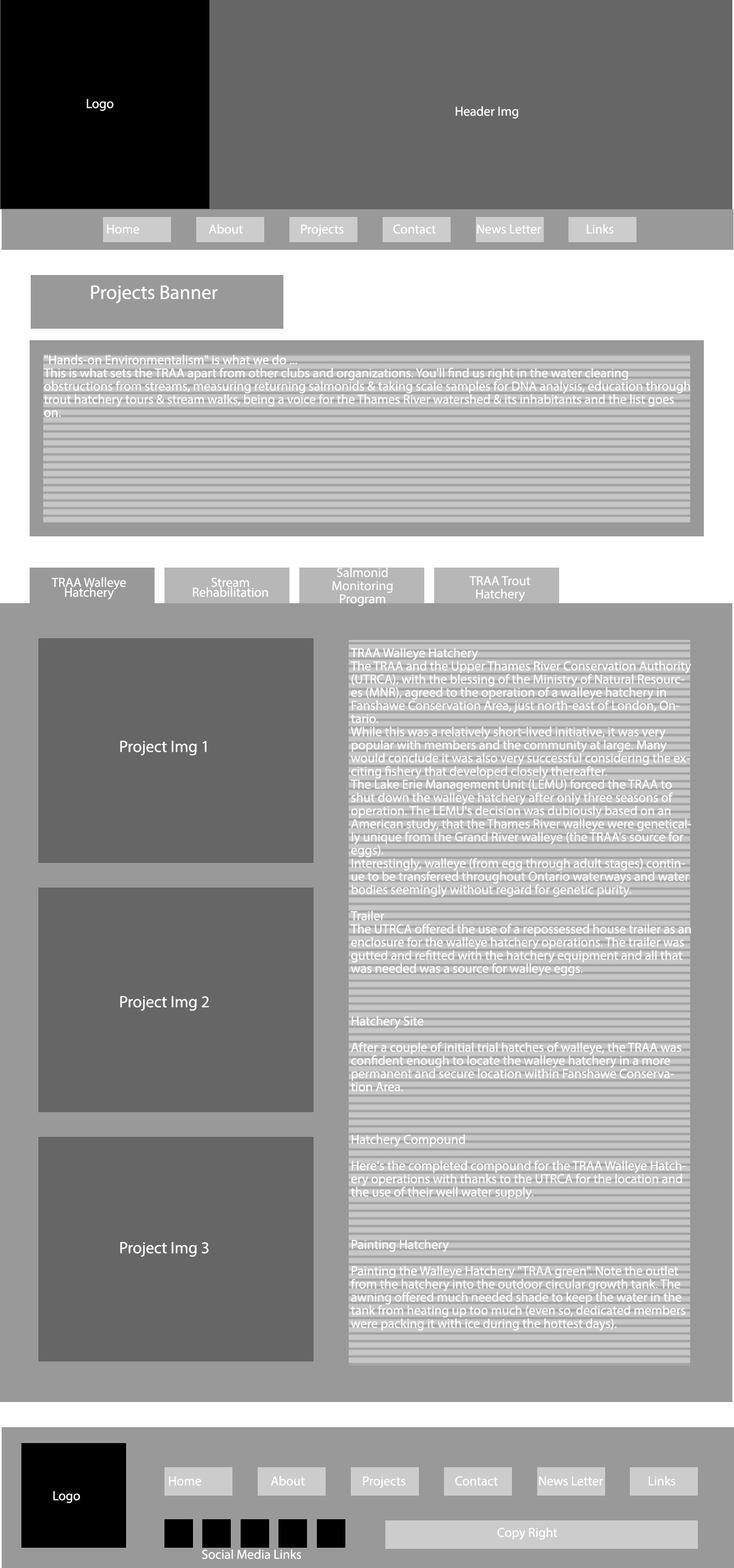
<style>
.page{position:relative;width:734px;height:1568px;background:#666666}
.page>*{position:absolute;margin:0}
.t1{font:13.1px "MyriadPro-Regular";color:#ffffff}
.t2{font:19.7px "MyriadPro-Regular";color:#ffffff}
.t3{font:13.1px/13.1px "MyriadPro-Regular";color:#ffffff}
.t4{font:13.1px/9.9px "MyriadPro-Regular";color:#ffffff}
.t5{font:16.4px "MyriadPro-Regular";color:#ffffff}
</style>
<div class="page">
<p class="t1" style="left:87px;top:99px;width:26px;height:12px">Logo</p>
<p class="t1" style="left:455px;top:106px;width:63px;height:13px">Header Img</p>
<p class="t1" style="left:107px;top:224px;width:32px;height:10px">Home</p>
<p class="t1" style="left:209px;top:224px;width:34px;height:10px">About</p>
<p class="t1" style="left:301px;top:224px;width:43px;height:13px">Projects</p>
<p class="t1" style="left:393px;top:224px;width:43px;height:10px">Contact</p>
<p class="t1" style="left:477px;top:224px;width:64px;height:10px">News Letter</p>
<p class="t1" style="left:586px;top:224px;width:27px;height:10px">Links</p>
<p class="t2" style="left:91px;top:285px;width:127px;height:19px">Projects Banner</p>
<p class="t3" style="left:43px;top:354px;width:647px;height:63px">"Hands-on Environmentalism" is what we do ...<br>This is what sets the TRAA apart from other clubs and organizations. You'll find us right in the water clearing obstructions from streams, measuring returning salmonids &amp; taking scale samples for DNA analysis, education through trout hatchery tours &amp; stream walks, being a voice for the Thames River watershed &amp; its inhabitants and the list goes on.</p>
<p class="t3" style="left:332px;top:567px;width:61px;height:39px;text-align:center">Salmonid Monitoring Program</p>
<p class="t4" style="left:51px;top:577px;width:75px;height:23px;text-align:center">TRAA Walleye Hatchery</p>
<p class="t1" style="left:193px;top:577px;width:75px;height:20px">Stream Rehabilitation</p>
<p class="t3" style="left:469px;top:576px;width:61px;height:26px;text-align:center">TRAA Trout Hatchery</p>
<p class="t3" style="left:350px;top:648px;width:341px;height:683px">TRAA Walleye Hatchery<br>The TRAA and the Upper Thames River Conservation Authority (UTRCA), with the blessing of the Ministry of Natural Resources (MNR), agreed to the operation of a walleye hatchery in Fanshawe Conservation Area, just north-east of London, Ontario. <br>While this was a relatively short-lived initiative, it was very popular with members and the community at large. Many would conclude it was also very successful considering the exciting fishery that developed closely thereafter.<br>The Lake Erie Management Unit (LEMU) forced the TRAA to shut down the walleye hatchery after only three seasons of operation. The LEMU's decision was dubiously based on an American study, that the Thames River walleye were genetically unique from the Grand River walleye (the TRAA's source for eggs).<br>Interestingly, walleye (from egg through adult stages) continue to be transferred throughout Ontario waterways and water bodies seemingly without regard for genetic purity.<br><br>Trailer<br>The UTRCA offered the use of a repossessed house trailer as an enclosure for the walleye hatchery operations. The trailer was gutted and refitted with the hatchery equipment and all that was needed was a source for walleye eggs.<br><br> <br><br>Hatchery Site<br><br>After a couple of initial trial hatches of walleye, the TRAA was confident enough to locate the walleye hatchery in a more permanent and secure location within Fanshawe Conservation Area.<br><br> <br><br>Hatchery Compound<br><br>Here's the completed compound for the TRAA Walleye Hatchery operations with thanks to the UTRCA for the location and the use of their well water supply.<br><br> <br><br>Painting Hatchery<br><br>Painting the Walleye Hatchery "TRAA green". Note the outlet from the hatchery into the outdoor circular growth tank. The awning offered much needed shade to keep the water in the tank from heating up too much (even so, dedicated members were packing it with ice during the hottest days).<br><br> <br><br>Kevin and Jars<br><br>Kevin makes the final checks on the newly installed "bell jar" incubators. Each unit was separately valved to precisely control <br>water flow so that the eggs were constantly agitated by <br>fresh water from the bottom.<br><br> <br><br>Eggs in JarFry in Jar<br><br>The picture on the left shows newly placed walleye eggs in the bell jar. The walleye fry, pictured on the right, begin hatching soon after <br>placement in the hatchery and start swimming almost immediately.<br><br> <br><br>EEggs in Bell Jars<br><br>Here you can see all five bell jars loaded with walleye eggs. Once the fry hatch they naturally swim upward and are taken away by the clear tube, into the black drain to the outside circular growth tank. <br><br>The fry were kept only for a short period of time in the growth tank as they became cannibalistic. After their short growth period they were released into weedy, protected areas in Fanshawe Reservoir to begin their new lives</p>
<p class="t5" style="left:120px;top:741px;width:87px;height:15px">Project Img 1</p>
<p class="t5" style="left:120px;top:996px;width:89px;height:15px">Project Img 2</p>
<p class="t5" style="left:120px;top:1242px;width:89px;height:15px">Project Img 3</p>
<p class="t1" style="left:169px;top:1476px;width:32px;height:10px">Home</p>
<p class="t1" style="left:271px;top:1476px;width:34px;height:10px">About</p>
<p class="t1" style="left:363px;top:1476px;width:42px;height:13px">Projects</p>
<p class="t1" style="left:455px;top:1476px;width:42px;height:10px">Contact</p>
<p class="t1" style="left:539px;top:1476px;width:64px;height:10px">News Letter</p>
<p class="t1" style="left:648px;top:1476px;width:27px;height:10px">Links</p>
<p class="t1" style="left:53px;top:1491px;width:27px;height:12px">Logo</p>
<p class="t1" style="left:497px;top:1527px;width:60px;height:13px">Copy Right</p>
<p class="t1" style="left:202px;top:1549px;width:99px;height:10px">Social Media Links</p>
</div>
